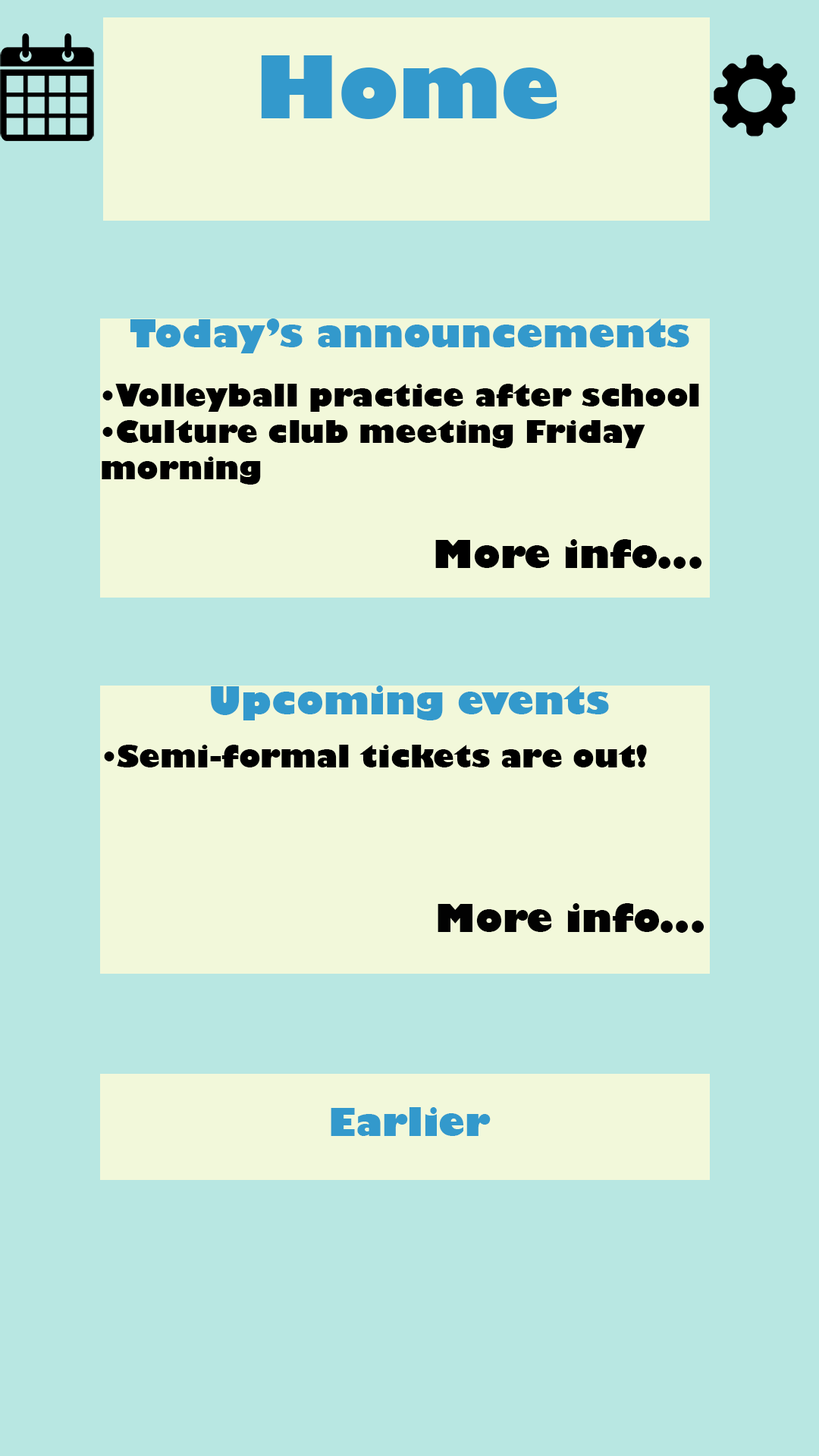
<style>
.page{position:relative;width:819px;height:1456px;background:#b8e7e2}
.page>*{position:absolute;margin:0}
.t1{font:84.9px "GillSans-UltraBold";color:#3399cc}
.t2{font:37.9px "GillSans-UltraBold";color:#3399cc}
.t3{font:30.3px "GillSans-UltraBold";color:#000000}
.t4{font:37.9px "GillSans-UltraBold";color:#000000}
.t5{font:37.9px "GillSans-UltraBold";color:#020202}
</style>
<div class="page">
<p class="t1" style="left:261px;top:55px;width:296px;height:64px">Home</p>
<p class="t2" style="left:130px;top:318px;width:559px;height:35px">Today’s announcements</p>
<p class="t3" style="left:102px;top:384px;width:597px;height:101px">•Volleyball practice after school<br>•Culture club meeting Friday <br>morning</p>
<p class="t4" style="left:435px;top:539px;width:267px;height:30px">More info...</p>
<p class="t2" style="left:211px;top:686px;width:398px;height:34px">Upcoming events</p>
<p class="t3" style="left:104px;top:745px;width:543px;height:22px">•Semi-formal tickets are out!</p>
<p class="t5" style="left:438px;top:903px;width:266px;height:30px">More info...</p>
<p class="t2" style="left:331px;top:1107px;width:160px;height:29px">Earlier</p>
</div>
